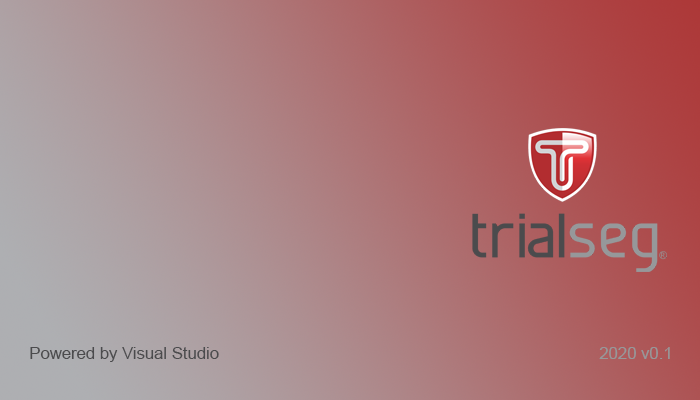
<style>
.page{position:relative;width:700px;height:400px}
.page>*{position:absolute;margin:0}
.t1{font:16.7px "ArialMT";color:#4b4b4d}
.t2{font:16.7px "ArialMT";color:#96989a}
</style>
<div class="page">
<p class="t1" style="left:30px;top:347px;width:189px;height:15px">Powered by Visual Studio</p>
<p class="t2" style="left:599px;top:347px;width:71px;height:12px">2020 v0.1</p>
</div>
